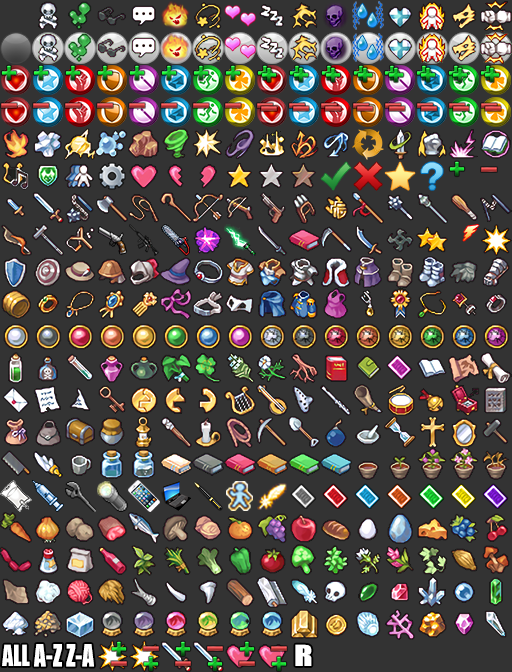
<style>
.page{position:relative;width:512px;height:672px;background:#333333}
.page>*{position:absolute;margin:0}
.t1{font:26.9px "Impact";letter-spacing:0.01em;color:#ffffff;scale:0.8 1}
.t2{font:28.6px "Impact";letter-spacing:0.01em;color:#ffffff;scale:0.81 1}
.t3{font:26.9px "Impact";letter-spacing:0.01em;color:#ffffff;scale:1.29 1}
</style>
<div class="page">
<p class="t1" style="left:2px;top:644px;width:28px;height:22px">ALL</p>
<p class="t2" style="left:34px;top:644px;width:28px;height:23px">A-Z</p>
<p class="t2" style="left:66px;top:644px;width:28px;height:23px">Z-A</p>
<p class="t3" style="left:295px;top:644px;width:17px;height:22px">R</p>
</div>
